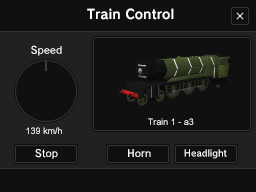
<style>
.page{position:relative;width:256px;height:192px;background:#101010}
.page>*{position:absolute;margin:0}
.t1{font:13px "RodinBokutohPro-B";color:#ffffff}
.t2{font:10px "RodinBokutohPro-DB";color:#ffffff}
.t3{font:9px "ArialMT";color:#ffffff}
.t4{font:9px "RodinBokutohPro-DB";color:#ffffff}
</style>
<div class="page">
<p class="t1" style="left:87px;top:8px;width:87px;height:12px">Train Control</p>
<p class="t2" style="left:31px;top:45px;width:31px;height:11px">Speed</p>
<p class="t3" style="left:148px;top:118px;width:46px;height:7px">Train 1 - a3</p>
<p class="t3" style="left:26px;top:127px;width:36px;height:7px">139 km/h</p>
<p class="t2" style="left:35px;top:149px;width:23px;height:10px">Stop</p>
<p class="t2" style="left:128px;top:149px;width:23px;height:8px">Horn</p>
<p class="t4" style="left:184px;top:149px;width:43px;height:10px">Headlight</p>
</div>
